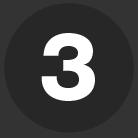
<style>
.page{position:relative;width:138px;height:138px;background:#272727}
.page>*{position:absolute;margin:0}
.t1{font:94px "HelveticaNeueLTStd-Hv";color:#ffffff}
</style>
<div class="page">
<p class="t1" style="left:41px;top:33px;width:54px;height:68px">3</p>
</div>
